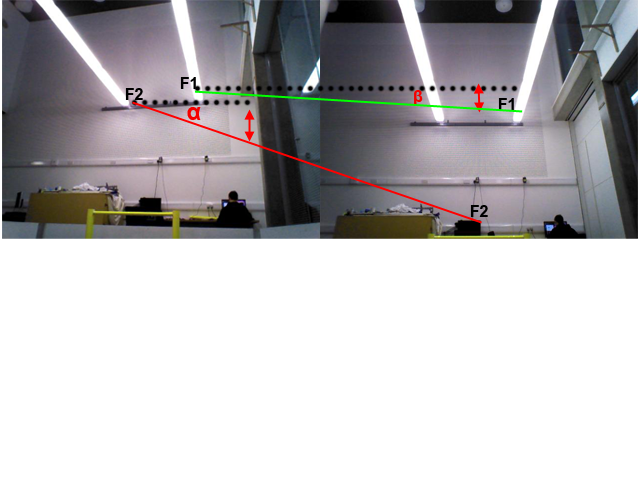
<style>
.page{position:relative;width:640px;height:480px;background:#ffffff}
.page>*{position:absolute;margin:0}
.t1{font:16px "Arial-BoldMT";color:#000000}
.t2{font:16px "Arial-BoldMT";color:#f50000}
.t3{font:24px "Arial-BoldMT";color:#f50000}
</style>
<div class="page">
<p class="t1" style="left:180px;top:77px;width:16px;height:12px">F1</p>
<p class="t1" style="left:125px;top:88px;width:18px;height:12px">F2</p>
<p class="t2" style="left:414px;top:90px;width:9px;height:15px">β</p>
<p class="t1" style="left:498px;top:98px;width:16px;height:12px">F1</p>
<p class="t3" style="left:187px;top:107px;width:14px;height:13px">α</p>
<p class="t1" style="left:470px;top:205px;width:18px;height:12px">F2</p>
</div>
